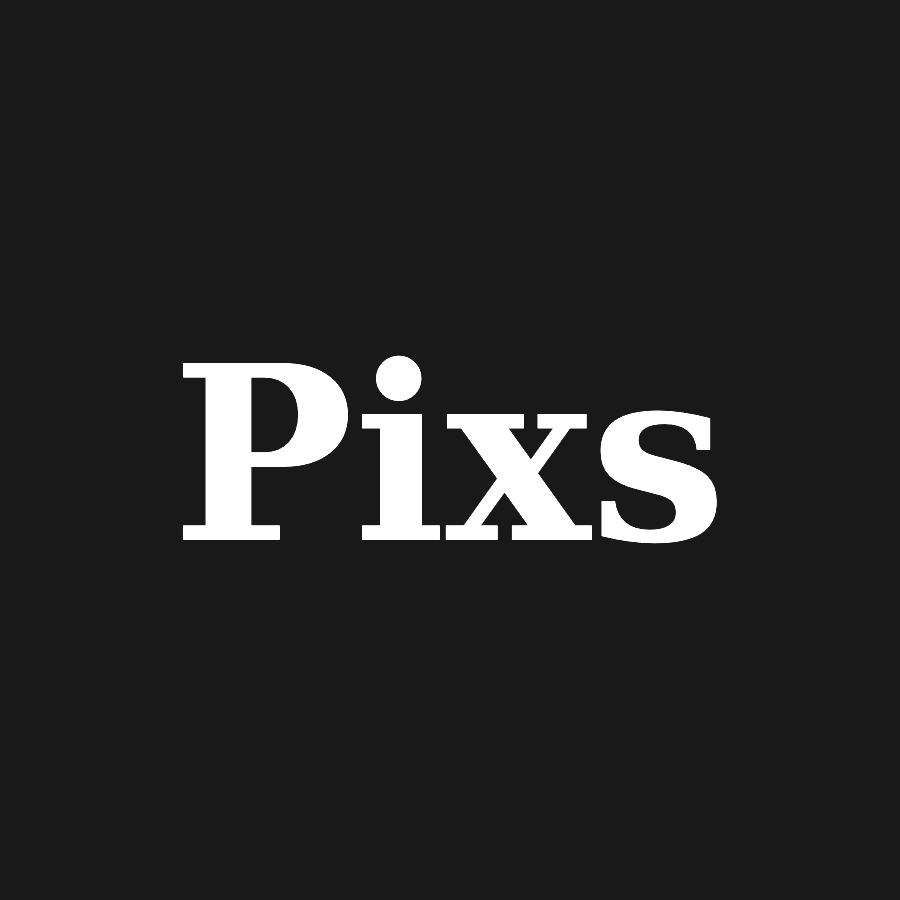
<style>
.page{position:relative;width:900px;height:900px;background:#191919}
.page>*{position:absolute;margin:0}
.t1{font:242.2px "Serif12Beta-Bold";color:#ffffff}
</style>
<div class="page">
<p class="t1" style="left:183px;top:355px;width:534px;height:189px">Pixs</p>
</div>
